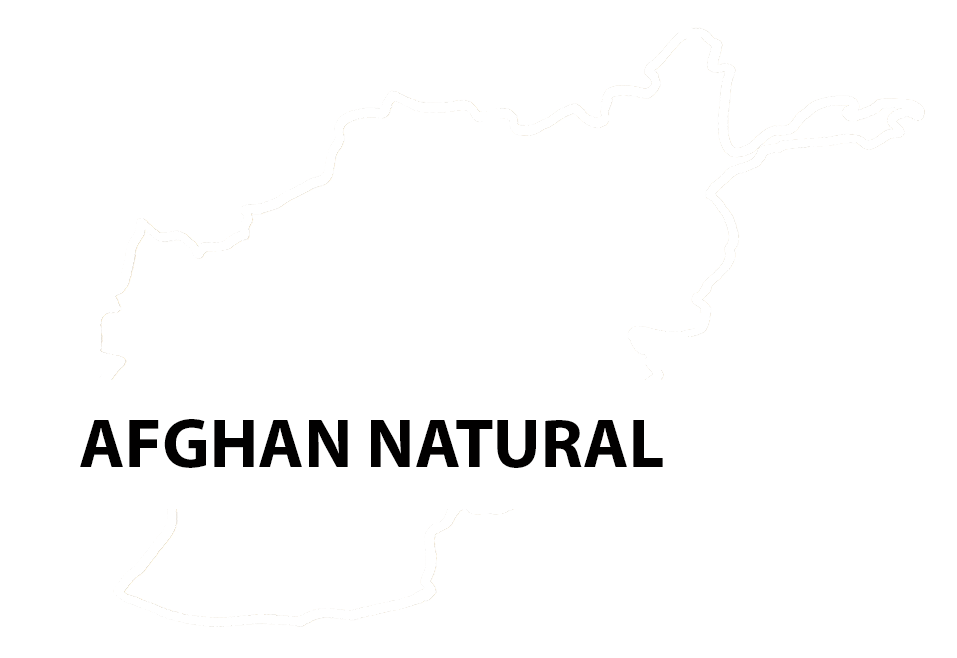
<style>
.page{position:relative;width:957px;height:658px;background:#ffffff}
.page>*{position:absolute;margin:0}
.t1{font:70px "MyriadPro-Bold";color:#010000}
</style>
<div class="page">
<p class="t1" style="left:80px;top:419px;width:583px;height:49px">AFGHAN NATURAL</p>
</div>
